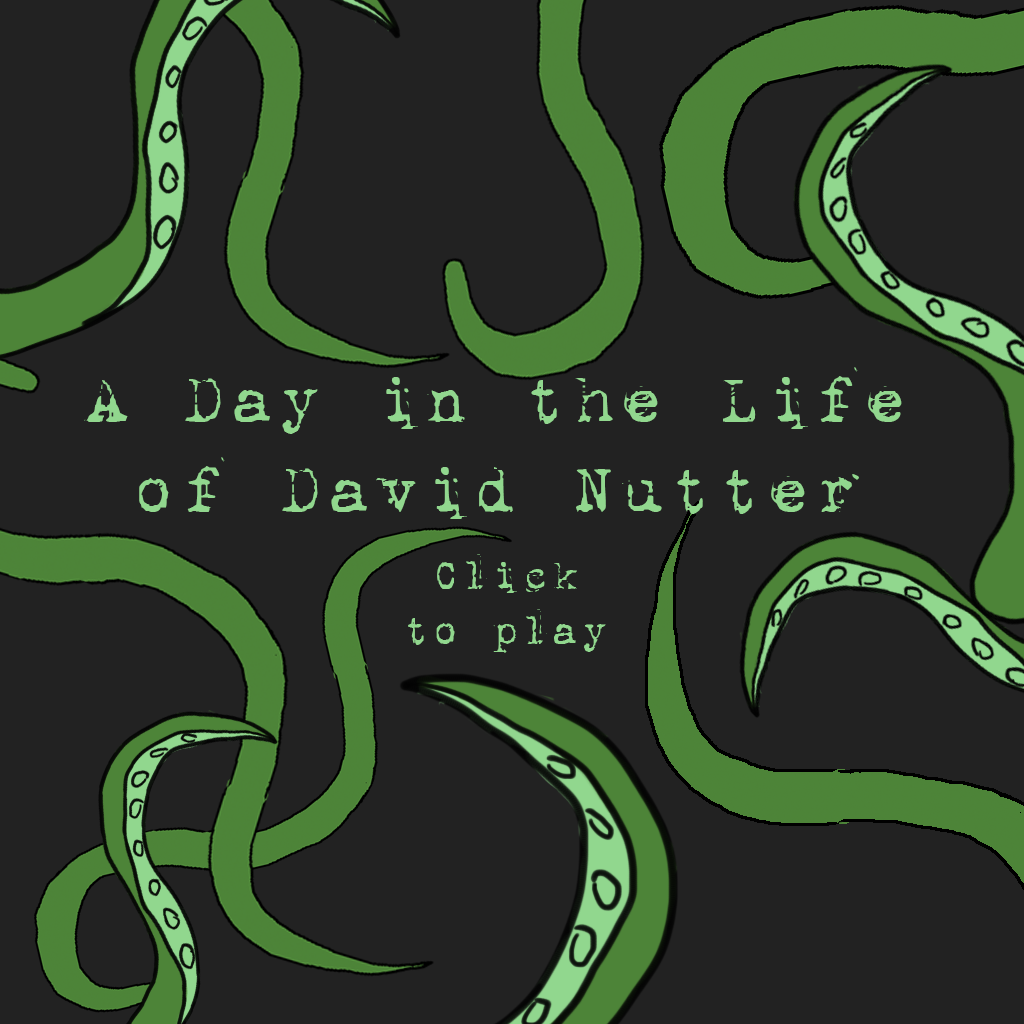
<style>
.page{position:relative;width:1024px;height:1024px;background:#222222}
.page>*{position:absolute;margin:0}
.t1{font:75px "1942report";color:#91d78e}
.t2{font:45.8px "1942report";color:#91d78e}
</style>
<div class="page">
<p class="t1" style="left:84px;top:367px;width:818px;height:152px;text-align:center">A Day in the Life of David Nutter</p>
<p class="t2" style="left:408px;top:554px;width:198px;height:99px;text-align:center">Click<br>to play</p>
</div>
